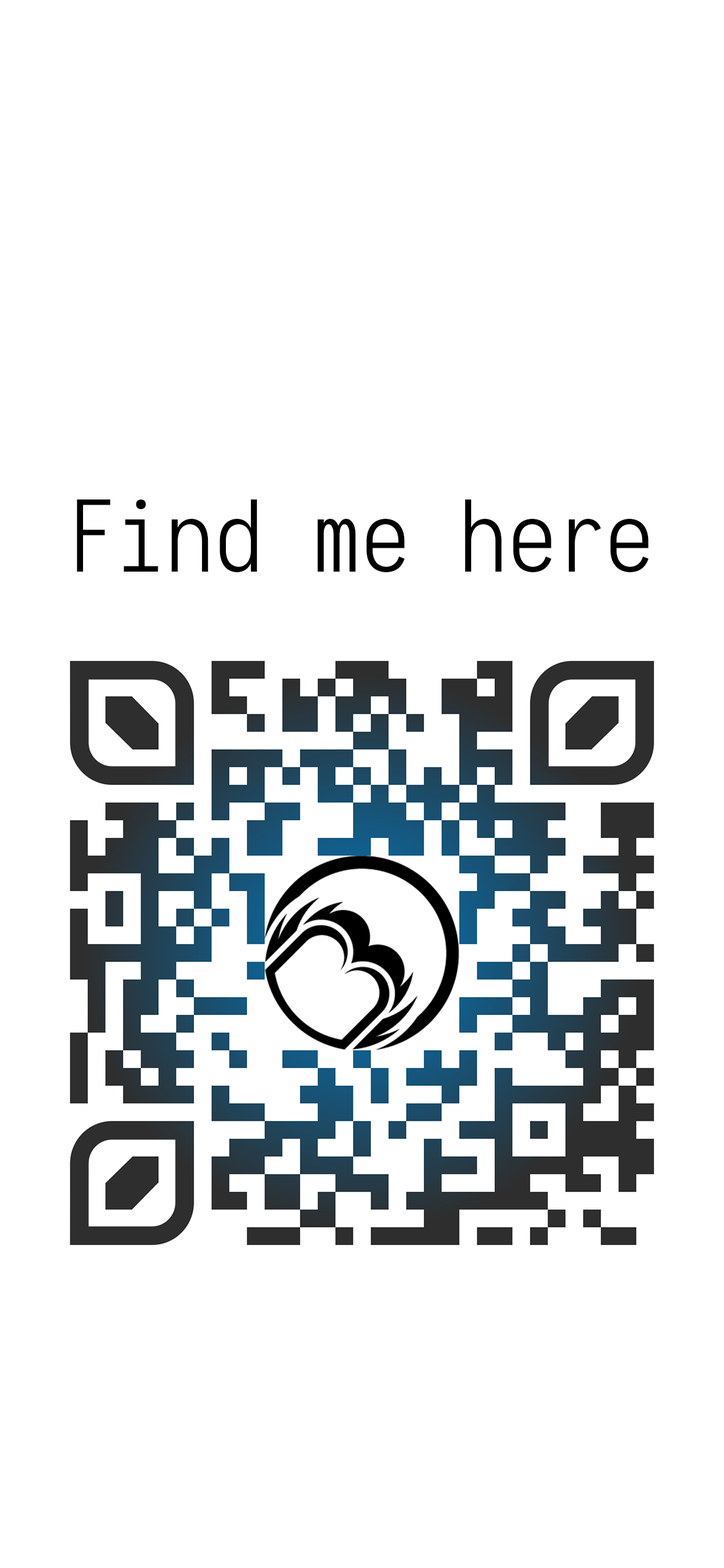
<style>
.page{position:relative;width:724px;height:1568px;background:#ffffff}
.page>*{position:absolute;margin:0}
.t1{font:97.7px "Iosevka-Light";color:#000000}
</style>
<div class="page">
<p class="t1" style="left:77px;top:499px;width:572px;height:73px">Find me here</p>
</div>
